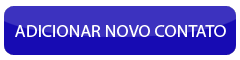
<style>
.page{position:relative;width:240px;height:60px;background:#3c32bf}
.page>*{position:absolute;margin:0}
.t1{font:17.8px "MyriadPro-Regular";color:#ffffff}
</style>
<div class="page">
<p class="t1" style="left:15px;top:25px;width:211px;height:12px">ADICIONAR NOVO CONTATO</p>
</div>
